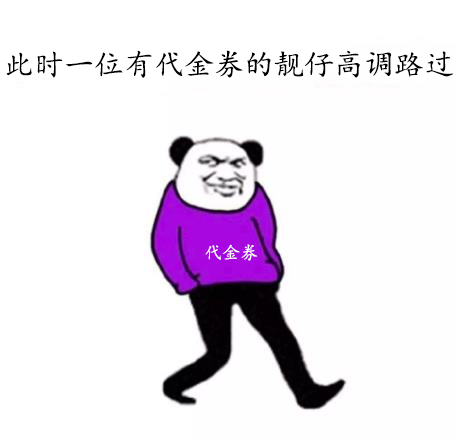
<style>
.page{position:relative;width:456px;height:438px;background:#ffffff}
.page>*{position:absolute;margin:0}
.t1{font:30px "KaiTi";color:#000000}
.t2{font:18px "KaiTi";color:#ffffff}
</style>
<div class="page">
<p class="t1" style="left:6px;top:50px;width:448px;height:28px">此时一位有代金券的靓仔高调路过</p>
<p class="t2" style="left:205px;top:244px;width:53px;height:17px">代金券</p>
</div>
